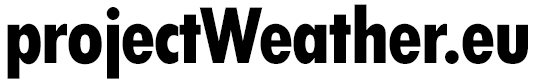
<style>
.page{position:relative;width:536px;height:84px;background:#ffffff}
.page>*{position:absolute;margin:0}
.t1{font:85px "TwCenMT-CondensedExtraBold";letter-spacing:-0.035em;color:#000000}
</style>
<div class="page">
<p class="t1" style="left:7px;top:4px;width:521px;height:75px">projectWeather.eu</p>
</div>
